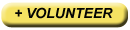
<style>
.page{position:relative;width:130px;height:30px;background:#f5e262}
.page>*{position:absolute;margin:0}
.t1{font:14px "Arial-BoldItalicMT";color:#040404}
</style>
<div class="page">
<p class="t1" style="left:15px;top:7px;width:98px;height:12px">+ VOLUNTEER</p>
</div>
